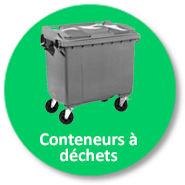
<style>
.page{position:relative;width:185px;height:185px;background:#00cc66}
.page>*{position:absolute;margin:0}
.t1{font:18px/16px "Calibri-Bold";color:#ffffff}
</style>
<div class="page">
<p class="t1" style="left:40px;top:132px;width:97px;height:30px;text-align:center">Conteneurs à <br>déchets</p>
</div>
